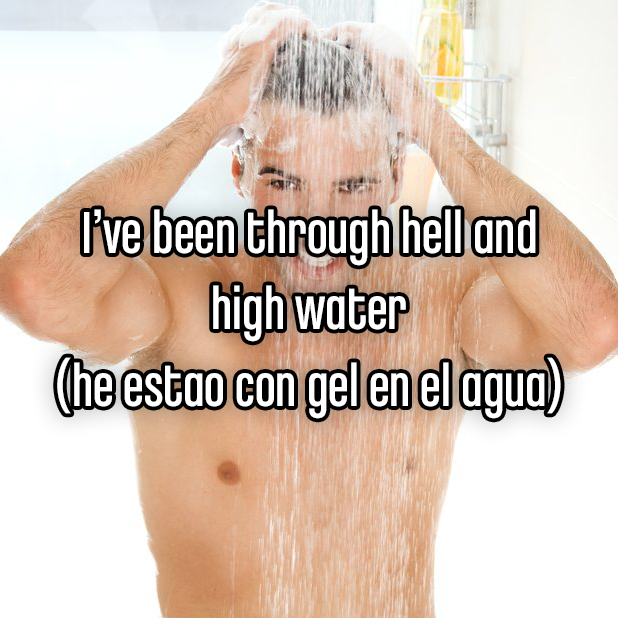
<style>
.page{position:relative;width:618px;height:618px}
.page>*{position:absolute;margin:0}
.t1{font:62.9px "ChaletComprime-CologneEighty";color:#ffffff}
</style>
<div class="page">
<p class="t1" style="left:57px;top:209px;width:504px;height:210px;text-align:center">I’ve been through hell and<br>high water<br>(he estao con gel en el agua)</p>
</div>
